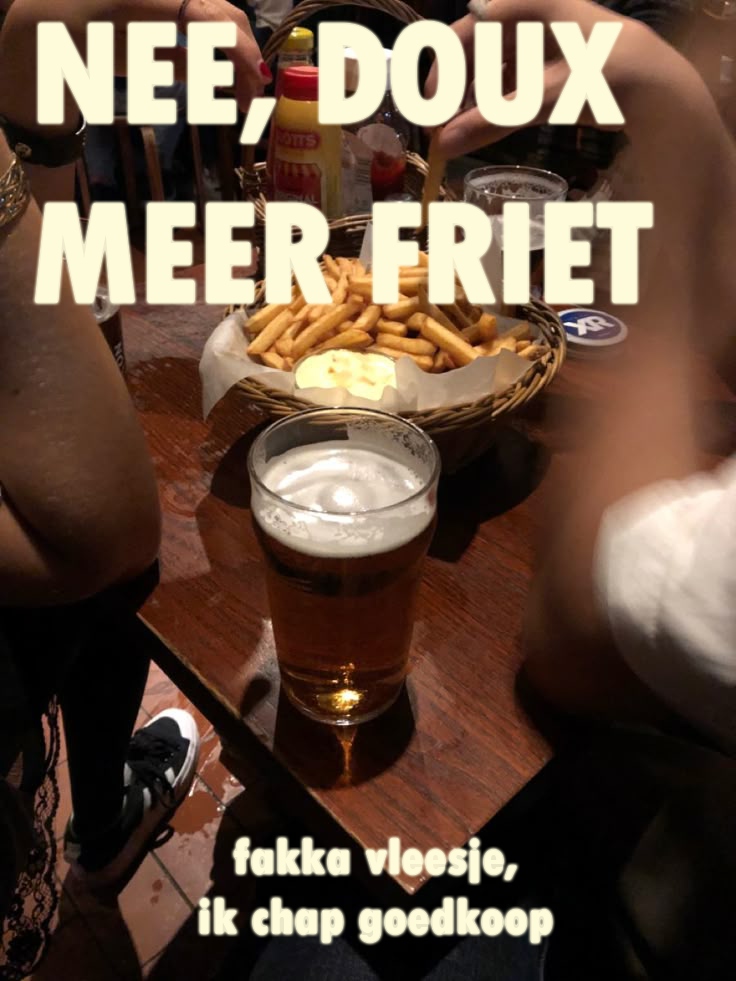
<style>
.page{position:relative;width:736px;height:981px}
.page>*{position:absolute;margin:0}
.t1{font:150px "TwCenMT-CondensedExtraBold";letter-spacing:-0.02em;color:#fefbda}
.t2{font:50px "TwCenMT-CondensedExtraBold";letter-spacing:0.03em;color:#fefbda}
</style>
<div class="page">
<p class="t1" style="left:36px;top:22px;width:616px;height:280px">NEE, DOUX MEER FRIET<br>FAKKA VLEES</p>
<p class="t2" style="left:200px;top:839px;width:352px;height:103px;text-align:center">fakka vleesje,<br>ik chap goedkoop</p>
</div>
